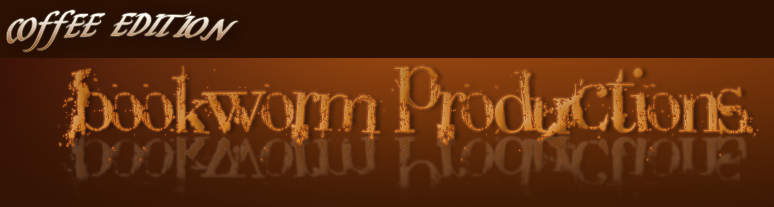
<style>
.page{position:relative;width:774px;height:207px;background:#2d1102}
.page>*{position:absolute;margin:0}
.t1{font:44.8px "SliverNormal";scale:1.33 1}
.t2{font:72px "PlagueDeath";color:#c88234}
.t3{font:70.2px "PlagueDeath";color:#6c3d1b}
</style>
<div class="page">
<p class="t1" style="left:7px;top:10px;width:231px;height:42px">COffEE EDITION</p>
<p class="t2" style="left:59px;top:66px;width:699px;height:95px">BOOKWORM PRODUCTIONS.</p>
<p class="t3" style="left:58px;top:110px;width:697px;height:93px">BOOKWORM PRODUCTIONS</p>
</div>
